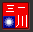
<style>
.page{position:relative;width:33px;height:32px;background:#f20000}
.page>*{position:absolute;margin:0}
.t1{font:10.4px "SimSun";color:#ffffff}
.t2{font:11.7px "SimSun";color:#ffffff}
</style>
<div class="page">
<p class="t1" style="left:6px;top:5px;width:19px;height:7px">三一</p>
<p class="t2" style="left:16px;top:15px;width:11px;height:12px">川</p>
</div>
